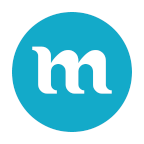
<style>
.page{position:relative;width:144px;height:144px;background:#ffffff}
.page>*{position:absolute;margin:0}
.t1{font:120px "Hulse";color:#13aac9}
</style>
<div class="page">
<p class="t1" style="left:12px;top:12px;width:120px;height:120px">M</p>
</div>
